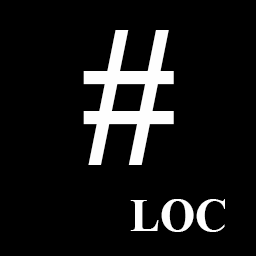
<style>
.page{position:relative;width:256px;height:256px;background:#000000}
.page>*{position:absolute;margin:0}
.t1{font:195.2px "TimesNewRomanPS-BoldMT";color:#fefefe}
.t2{font:45.4px "TimesNewRomanPS-BoldMT";color:#fefefe}
</style>
<div class="page">
<p class="t1" style="left:83px;top:30px;width:91px;height:135px">#</p>
<p class="t2" style="left:130px;top:199px;width:95px;height:33px">LOC</p>
</div>
